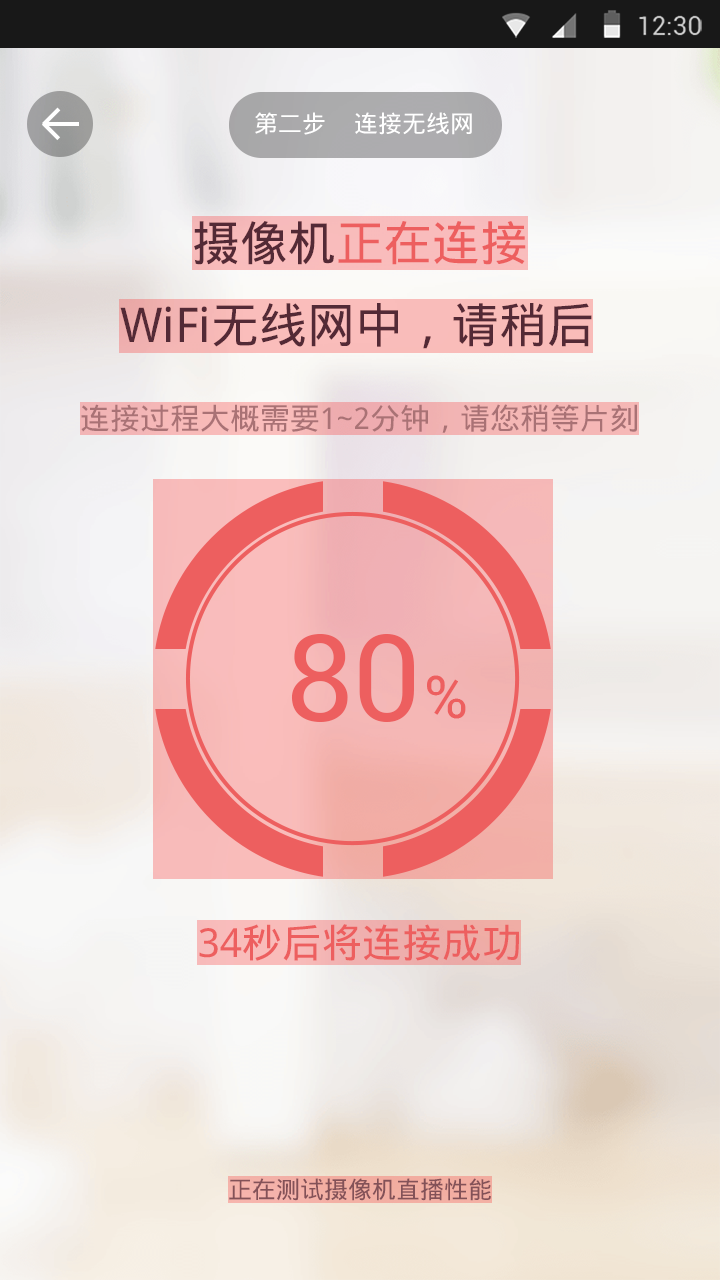
<style>
.page{position:relative;width:720px;height:1280px}
.page>*{position:absolute;margin:0}
.t1{font:24px "DroidSansFallback";color:#ffffff}
.t2{font:48px "DroidSansFallback"}
.t3{font:48px "DroidSansFallback";color:#532a36}
.t4{font:30px "DroidSansFallback";color:#a97275}
.t5{font:120px "Roboto-Regular";color:#e87373}
.t6{font:60px "Roboto-Regular";color:#e87373}
.t7{font:40px "DroidSansFallback";color:#e87373}
.t8{font:24px "DroidSansFallback";color:#835258}
</style>
<div class="page">
<p class="t1" style="left:255px;top:112px;width:70px;height:23px">第二步</p>
<p class="t1" style="left:355px;top:112px;width:117px;height:23px">连接无线网</p>
<p class="t2" style="left:194px;top:221px;width:332px;height:44px">摄像机正在连接</p>
<p class="t3" style="left:120px;top:303px;width:472px;height:46px">WiFi无线网中，请稍后</p>
<p class="t4" style="left:81px;top:404px;width:556px;height:29px">连接过程大概需要1~2分钟，请您稍等片刻</p>
<p class="t5" style="left:291px;top:634px;width:123px;height:88px">80</p>
<p class="t6" style="left:427px;top:675px;width:39px;height:44px">%</p>
<p class="t7" style="left:199px;top:924px;width:320px;height:37px">34秒后将连接成功</p>
<p class="t8" style="left:229px;top:1178px;width:262px;height:23px">正在测试摄像机直播性能</p>
</div>
